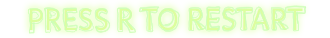
<style>
.page{position:relative;width:330px;height:38px}
.page>*{position:absolute;margin:0}
.t1{font:30.1px "Lato-Regular";letter-spacing:0.025em;color:#f4ffa8;text-transform:uppercase;scale:0.9 1}
</style>
<div class="page">
<p class="t1" style="left:30px;top:8px;width:273px;height:23px">Press R To Restart</p>
</div>
